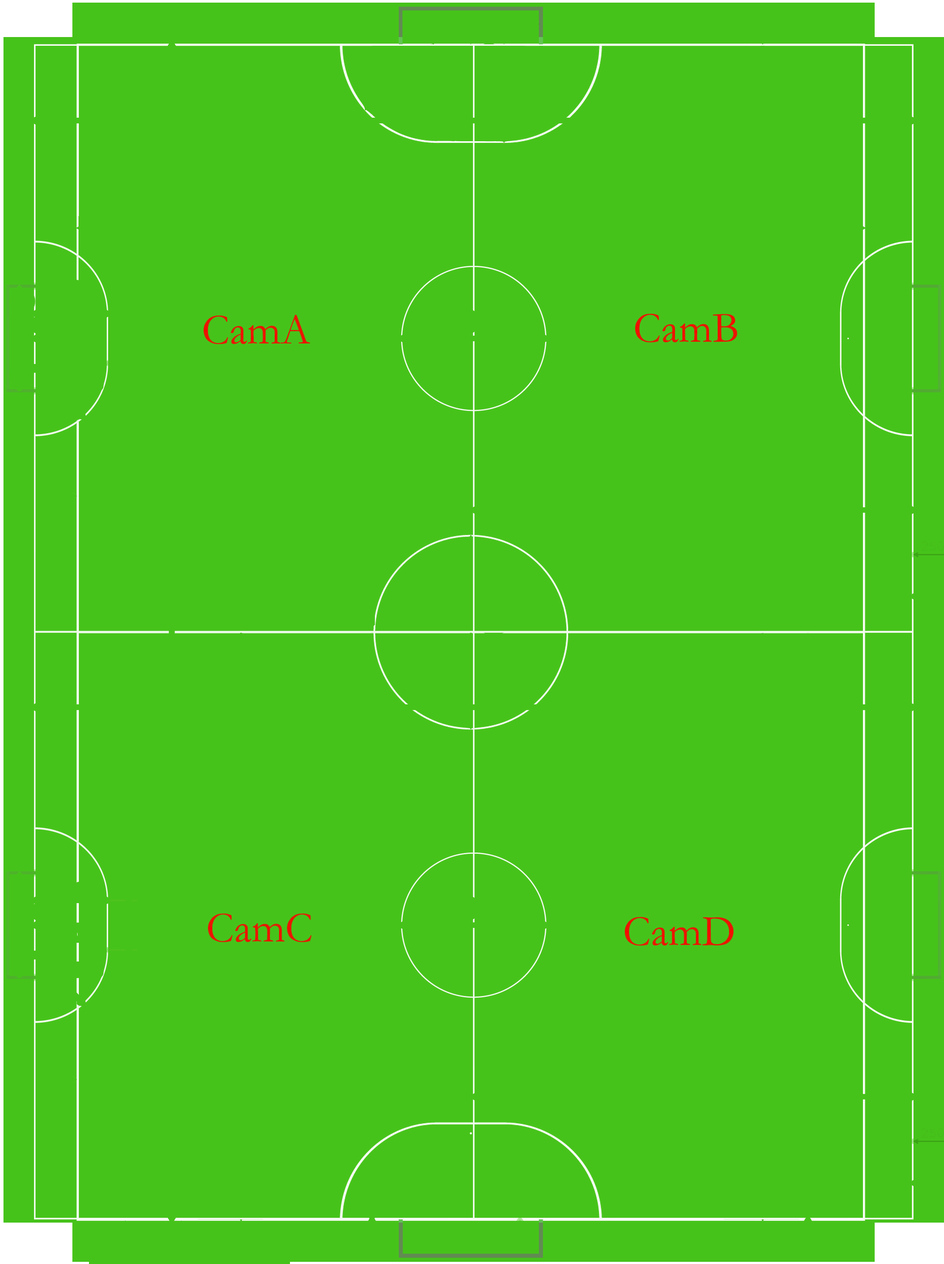
<style>
.page{position:relative;width:944px;height:1264px;background:#46c31a}
.page>*{position:absolute;margin:0}
.t1{font:43.6px "Garamond";color:#e61b04}
.t2{font:43.6px "Garamond";color:#eb1503}
.t3{font:43.6px "Garamond";color:#e41c04}
.t4{font:43.6px "Garamond";color:#ea1603}
</style>
<div class="page">
<p class="t1" style="left:204px;top:315px;width:106px;height:29px">CamA</p>
<p class="t2" style="left:635px;top:313px;width:102px;height:30px">CamB</p>
<p class="t3" style="left:208px;top:913px;width:104px;height:29px">CamC</p>
<p class="t4" style="left:625px;top:916px;width:108px;height:30px">CamD</p>
</div>
